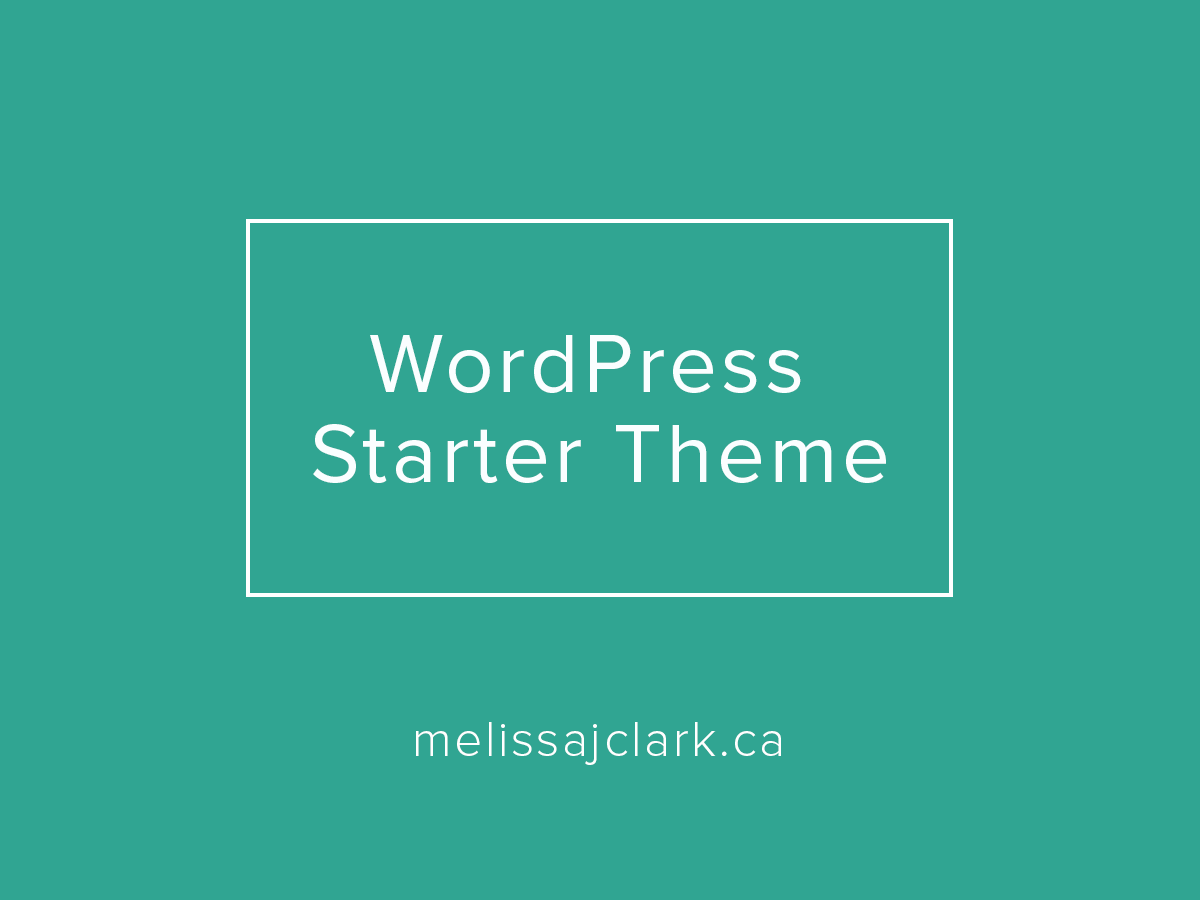
<style>
.page{position:relative;width:1200px;height:900px;background:#30a592}
.page>*{position:absolute;margin:0}
.t1{font:85px/90px "ProximaNova-Regular";letter-spacing:0.05em;color:#fafeff}
.t2{font:50px "ProximaNova-Light";letter-spacing:0.05em;color:#ffffff}
</style>
<div class="page">
<p class="t1" style="left:313px;top:335px;width:573px;height:148px;text-align:center">WordPress <br>Starter Theme</p>
<p class="t2" style="left:416px;top:722px;width:365px;height:43px">melissajclark.ca</p>
</div>
